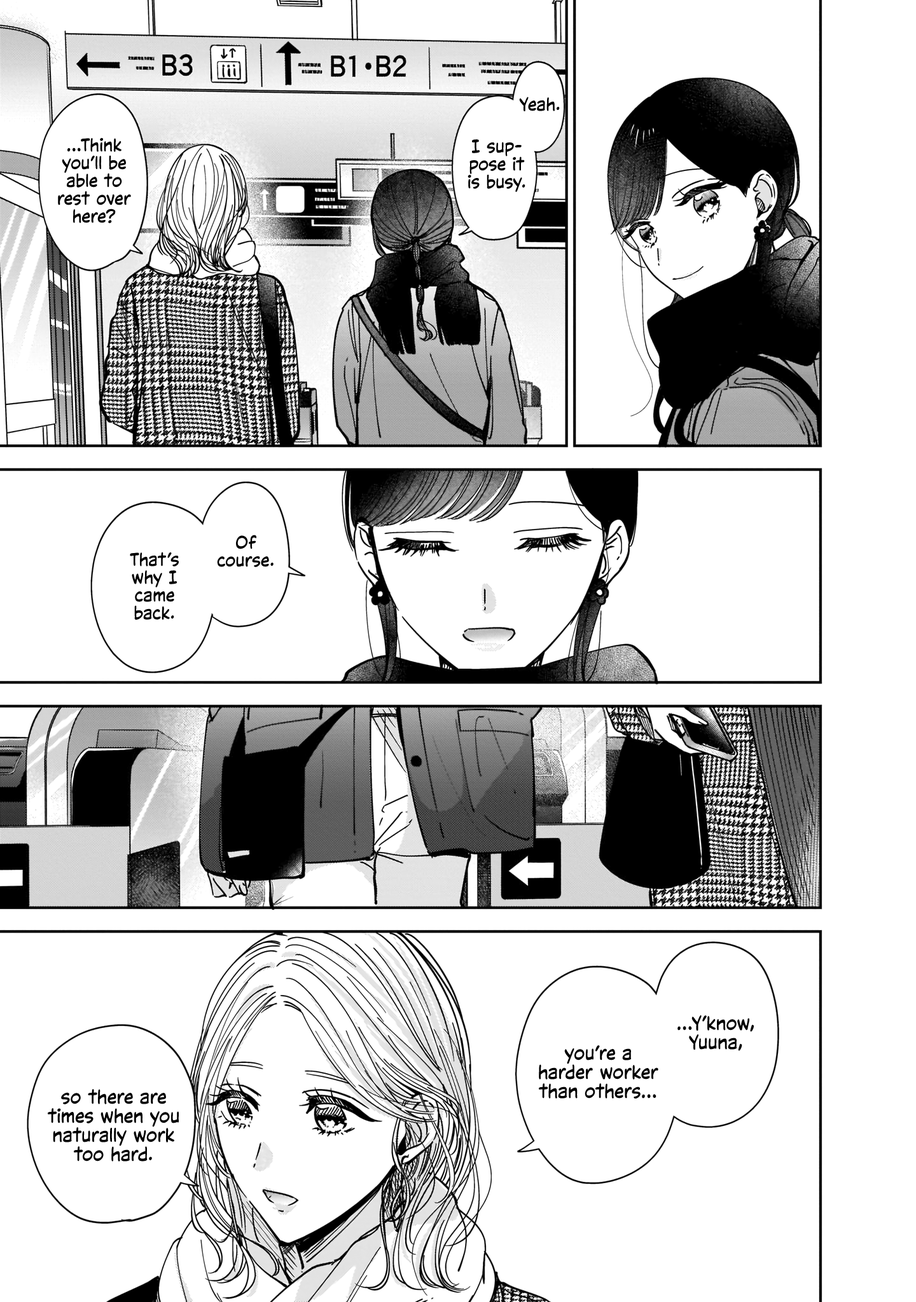
<style>
.page{position:relative;width:916px;height:1302px;background:#ffffff}
.page>*{position:absolute;margin:0}
.t1{font:17.8px "CCVictorySpeechLower-Regular";color:#000000}
.t2{font:19.1px "CCVictorySpeechLower-Regular";color:#000000}
</style>
<div class="page">
<p class="t1" style="left:519px;top:97px;width:41px;height:14px">Yeah.</p>
<p class="t1" style="left:58px;top:138px;width:73px;height:85px;text-align:center">...Think<br>you’ll be<br>able to<br>rest over<br>here?</p>
<p class="t1" style="left:467px;top:139px;width:58px;height:53px;text-align:center">I sup-<br>pose it<br>is busy.</p>
<p class="t1" style="left:217px;top:535px;width:56px;height:32px;text-align:center">Of<br>course.</p>
<p class="t1" style="left:130px;top:552px;width:49px;height:68px;text-align:center">That’s<br>why I<br>came<br>back.</p>
<p class="t2" style="left:677px;top:1015px;width:77px;height:36px;text-align:center">...Y’know,<br>Yuuna,</p>
<p class="t2" style="left:539px;top:1045px;width:119px;height:54px;text-align:center">you’re a<br>harder worker<br>than others...</p>
<p class="t2" style="left:48px;top:1089px;width:131px;height:73px;text-align:center">so there are<br>times when you<br>naturally work<br>too hard.</p>
</div>
